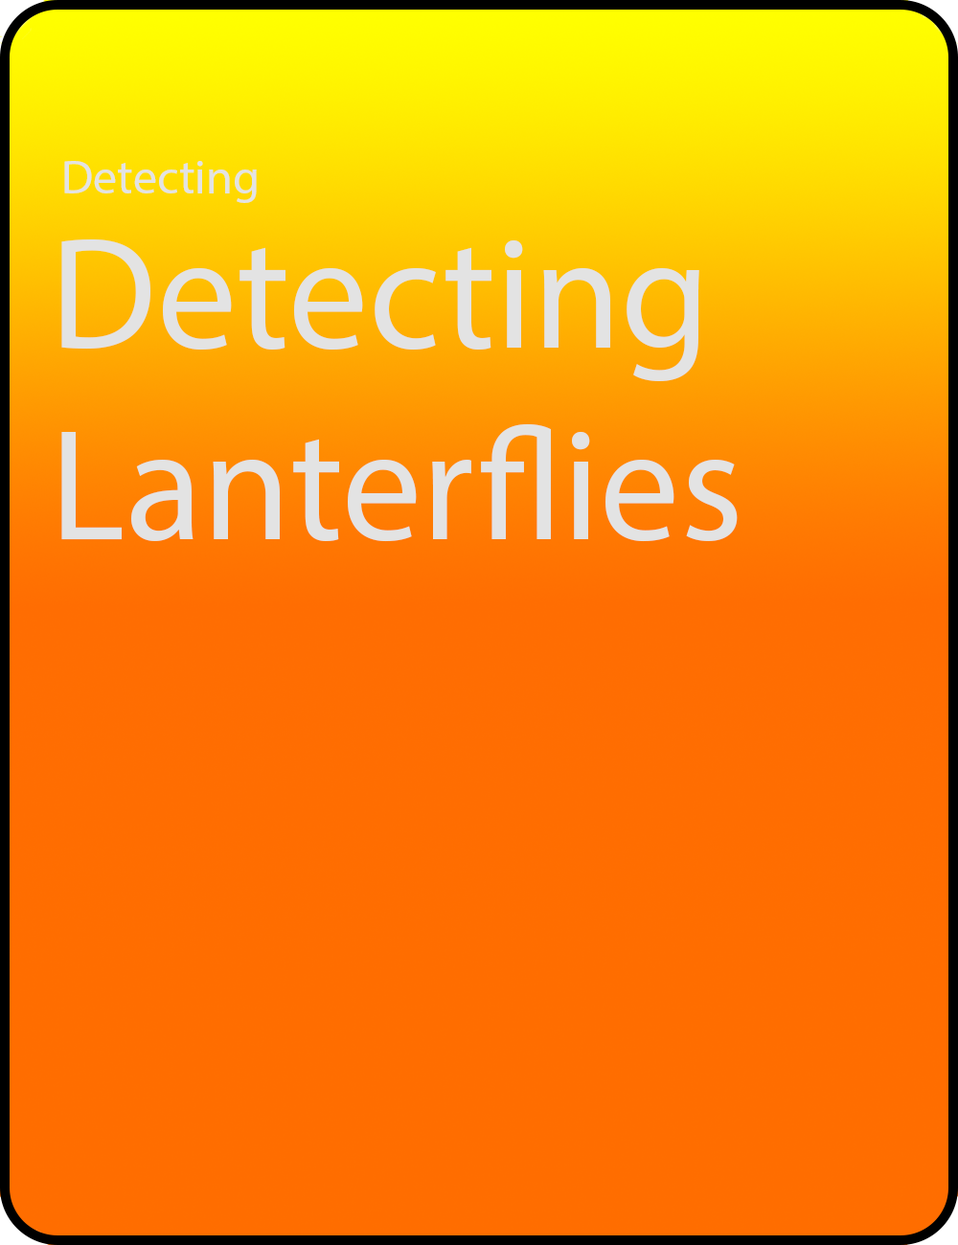
<style>
.page{position:relative;width:958px;height:1245px;background:#ff6d00}
.page>*{position:absolute;margin:0}
.t1{font:47.9px "MyriadPro-Regular";color:#e3e3e3}
.t2{font:159.6px "MyriadPro-Regular";color:#e3e3e3}
</style>
<div class="page">
<p class="t1" style="left:64px;top:161px;width:193px;height:42px">Detecting</p>
<p class="t2" style="left:61px;top:239px;width:676px;height:303px">Detecting<br>Lanterflies</p>
</div>
